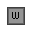
<style>
.page{position:relative;width:32px;height:32px;background:#ffffff}
.page>*{position:absolute;margin:0}
.t1{font:8px "KenPixel";color:#010101}
</style>
<div class="page">
<p class="t1" style="left:12px;top:12px;width:7px;height:7px">w</p>
</div>
